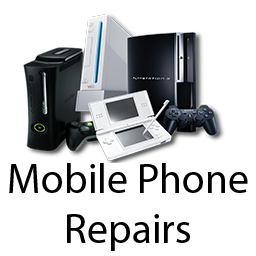
<style>
.page{position:relative;width:256px;height:256px;background:#ffffff}
.page>*{position:absolute;margin:0}
.t1{font:41.7px "MyriadPro-Regular";color:#000000}
</style>
<div class="page">
<p class="t1" style="left:9px;top:163px;width:239px;height:88px;text-align:center">Mobile Phone<br>Repairs</p>
</div>
